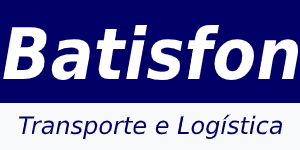
<style>
.page{position:relative;width:300px;height:150px;background:#000066}
.page>*{position:absolute;margin:0}
.t1{font:71.1px "DejaVuSansCondensed-BoldOblique";color:#ffffff}
.t2{font:24px "DejaVuSans-Oblique";color:#000066}
</style>
<div class="page">
<p class="t1" style="left:3px;top:25px;width:296px;height:56px">Batisfon</p>
<p class="t2" style="left:19px;top:114px;width:263px;height:25px">Transporte e Logística</p>
</div>
